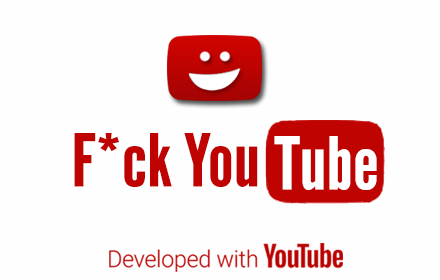
<style>
.page{position:relative;width:440px;height:280px;background:#fefefe}
.page>*{position:absolute;margin:0}
.t1{font:72.4px "LeagueGothic-Regular";color:#bf0301;scale:1.1 1}
.t2{font:72.4px "LeagueGothic-Regular";color:#ffffff;scale:1.1 1}
</style>
<div class="page">
<p class="t1" style="left:74px;top:133px;width:184px;height:54px">F*ck You</p>
<p class="t2" style="left:274px;top:136px;width:103px;height:54px">Tube</p>
</div>
